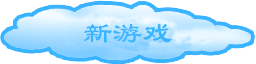
<style>
.page{position:relative;width:256px;height:64px;background:#ffffff}
.page>*{position:absolute;margin:0}
.t1{font:30px "LiSu";color:#3ab4ff}
</style>
<div class="page">
<p class="t1" style="left:83px;top:23px;width:89px;height:20px">新游戏</p>
</div>
